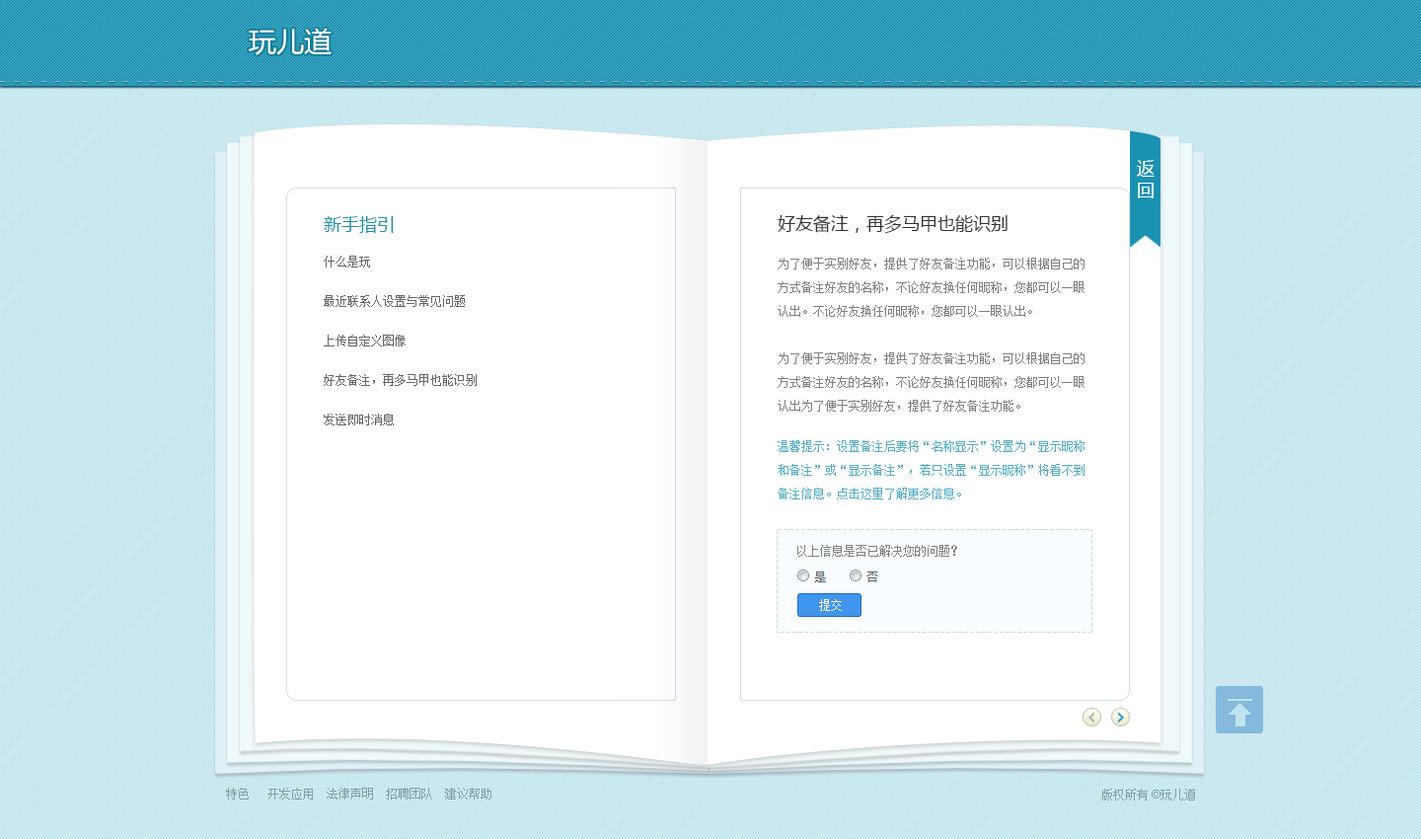
<style>
.page{position:relative;width:1421px;height:839px;background:#ffffff}
.page>*{position:absolute;margin:0}
.t1{font:27.6px "MicrosoftYaHei";color:#ffffff}
.t2{font:17.8px "MicrosoftYaHei";letter-spacing:0.2em;color:#ffffff}
.t3{font:17.8px "MicrosoftYaHei";color:#1992b1}
.t4{font:17.8px "MicrosoftYaHei";color:#333333}
.t5{font:11.8px/39.5px "SimSun";color:#666666}
.t6{font:11.8px/23.7px "SimSun";color:#808080}
.t7{font:11.8px/23.7px "SimSun";color:#53adc5}
.t8{font:11.8px "SimSun";color:#808080}
.t9{font:11.8px "SimSun";color:#ffffff}
.t10{font:11.8px "SimSun";color:#849fa6}
.t11{font:11.8px "ArialMT";color:#849fa6}
</style>
<div class="page">
<p class="t1" style="left:249px;top:28px;width:83px;height:27px">玩儿道</p>
<p class="t2" style="left:1137px;top:160px;width:18px;height:38px">返回</p>
<p class="t3" style="left:324px;top:216px;width:70px;height:17px">新手指引</p>
<p class="t4" style="left:778px;top:215px;width:230px;height:18px">好友备注，再多马甲也能识别</p>
<p class="t5" style="left:324px;top:256px;width:153px;height:169px">什么是玩<br>最近联系人设置与常见问题<br>上传自定义图像<br>好友备注，再多马甲也能识别<br>发送即时消息</p>
<p class="t6" style="left:778px;top:258px;width:307px;height:59px">为了便于实别好友，提供了好友备注功能，可以根据自己的方式备注好友的名称，不论好友换任何昵称，您都可以一眼认出。不论好友换任何昵称，您都可以一眼认出。</p>
<p class="t6" style="left:778px;top:352px;width:307px;height:60px">为了便于实别好友，提供了好友备注功能，可以根据自己的方式备注好友的名称，不论好友换任何昵称，您都可以一眼认出为了便于实别好友，提供了好友备注功能。</p>
<p class="t7" style="left:778px;top:440px;width:307px;height:59px">温馨提示：设置备注后要将“名称显示”设置为“显示昵称和备注”或“显示备注”，若只设置“显示昵称”将看不到备注信息。点击这里了解更多信息。</p>
<p class="t8" style="left:798px;top:545px;width:159px;height:12px">以上信息是否已解决您的问题？</p>
<p class="t9" style="left:819px;top:599px;width:23px;height:12px">提交</p>
<p class="t10" style="left:226px;top:788px;width:266px;height:11px">特色   开发应用  法律声明  招聘团队  建议帮助</p>
<p class="t10" style="left:1102px;top:789px;width:93px;height:11px">版权所有<span class="t11"> ©</span>玩儿道</p>
</div>
